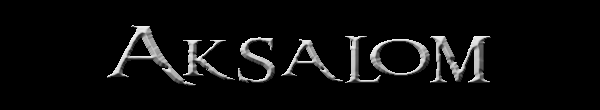
<style>
.page{position:relative;width:600px;height:110px;background:#000000}
.page>*{position:absolute;margin:0}
.t1{font:64.1px "RingbearerMedium";letter-spacing:0.04em;font-variant:small-caps;scale:1.54 1}
</style>
<div class="page">
<p class="t1" style="left:107px;top:25px;width:384px;height:61px">Aksalom</p>
<p class="t1" style="left:107px;top:25px;width:384px;height:61px">Aksalom</p>
</div>
